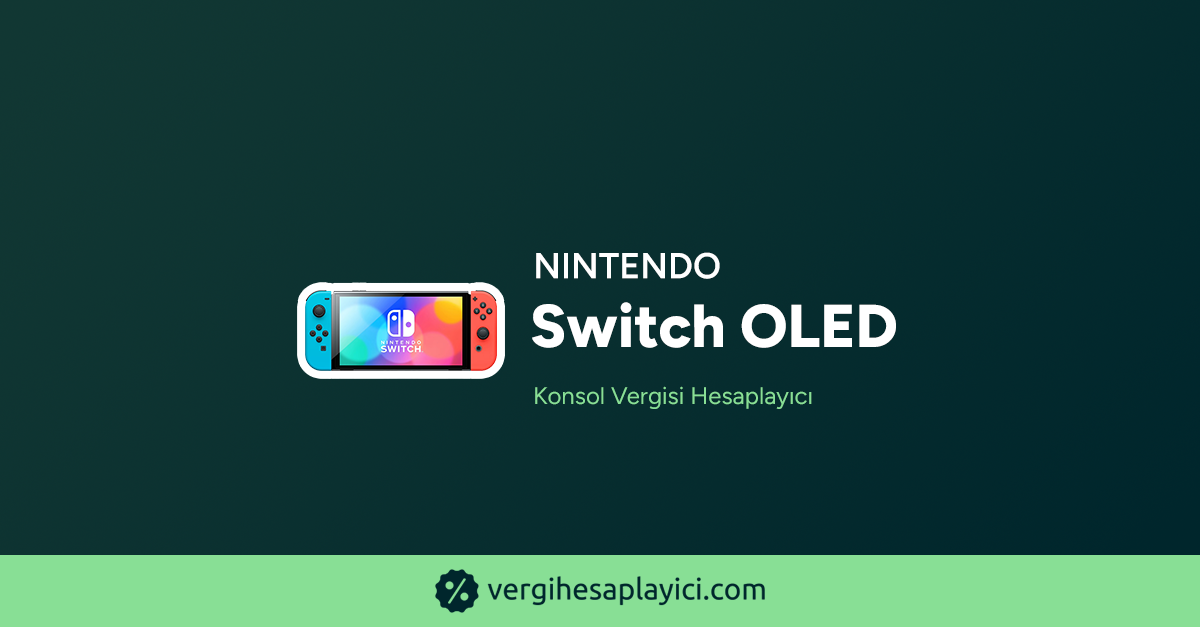
<style>
.page{position:relative;width:1200px;height:627px}
.page>*{position:absolute;margin:0}
.t1{font:36px "Figtree-SemiBold";color:#ffffff;text-transform:uppercase;font-weight:bold}
.t2{font:60.3px "Figtree-ExtraBold";color:#ffffff;font-weight:bold}
.t3{font:24px "Figtree-Regular";color:#88df95;font-weight:bold}
</style>
<div class="page">
<p class="t1" style="left:536px;top:252px;width:184px;height:27px">Nintendo</p>
<p class="t2" style="left:532px;top:302px;width:364px;height:46px">Switch OLED</p>
<p class="t3" style="left:535px;top:386px;width:277px;height:23px">Konsol Vergisi Hesaplayıcı</p>
</div>
